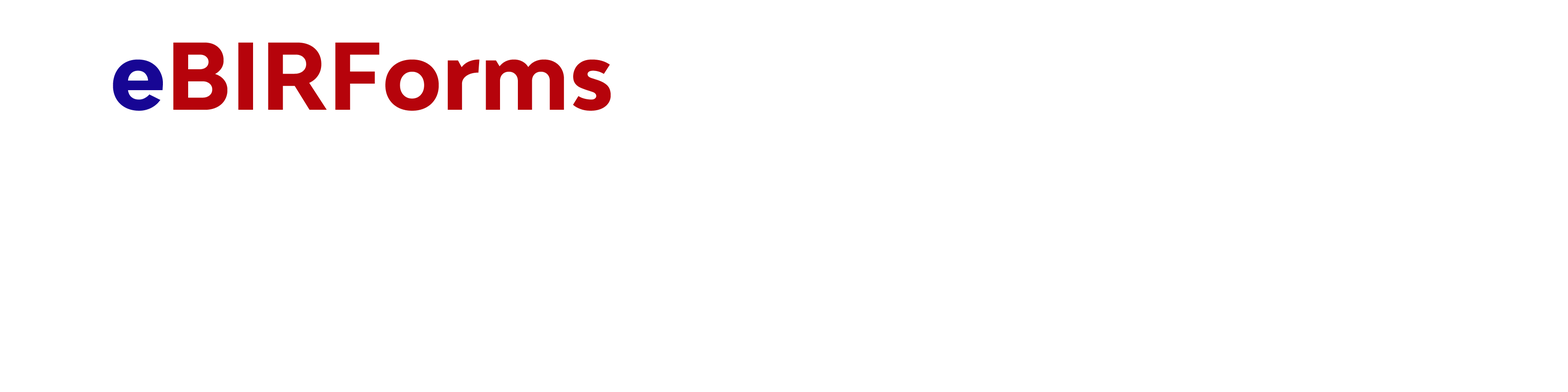
<style>
.page{position:relative;width:1568px;height:392px;background:#ffffff}
.page>*{position:absolute;margin:0}
.t1{font:90.7px "Adlinnaka-BoldDemo";color:#b6030b}
.t2{font:90.7px "Adlinnaka-BoldDemo";color:#170694}
</style>
<div class="page">
<p class="t1" style="left:113px;top:42px;width:498px;height:69px"><span class="t2">e</span>BIRForms</p>
</div>
